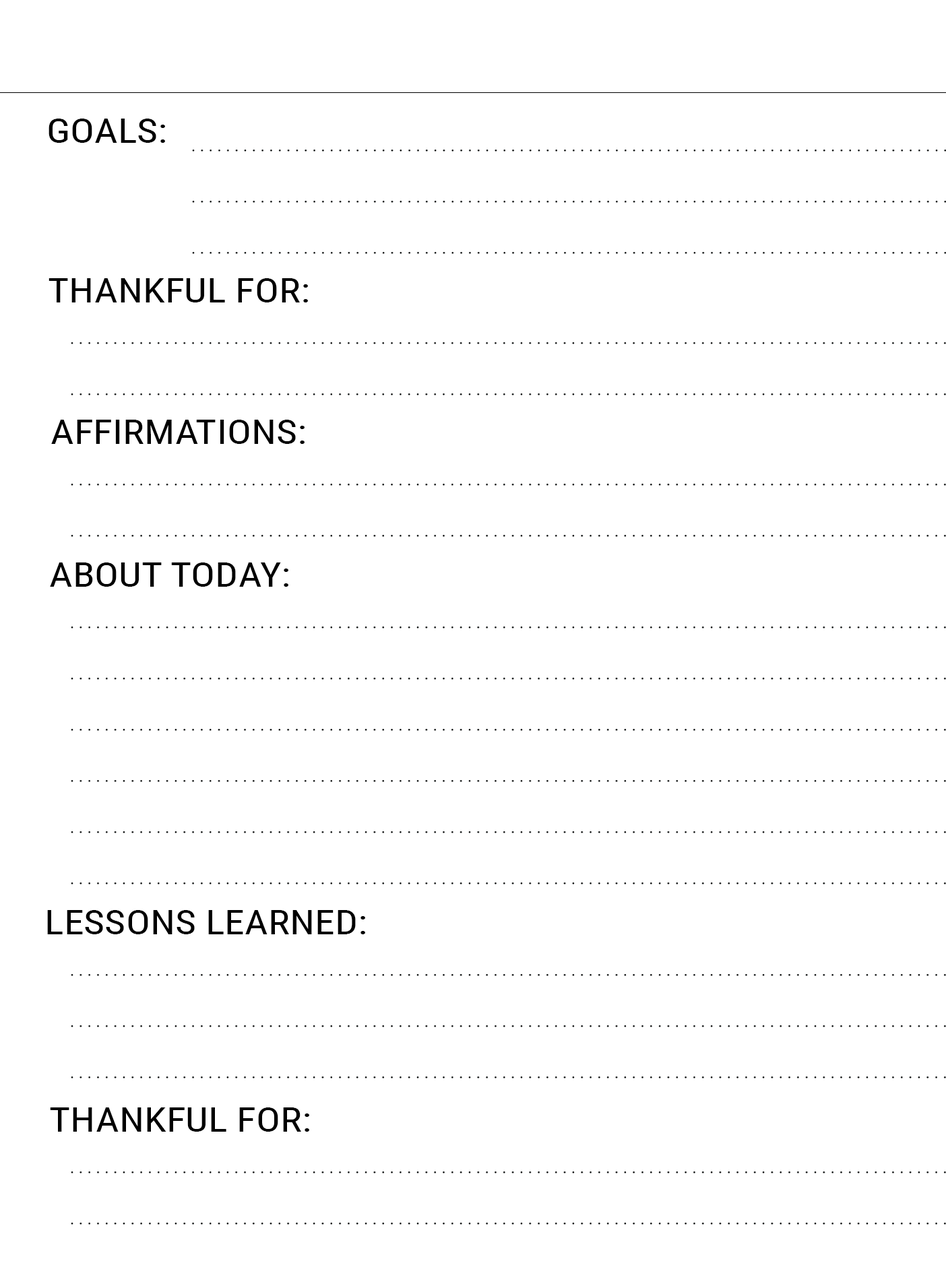
<style>
.page{position:relative;width:946px;height:1261px;background:#ffffff}
.page>*{position:absolute;margin:0}
.t1{font:33.7px "RobotoCondensed-Regular";color:#000000;scale:1.2 1}
</style>
<div class="page">
<p class="t1" style="left:48px;top:119px;width:117px;height:24px">GOALS:</p>
<p class="t1" style="left:48px;top:278px;width:260px;height:24px">THANKFUL FOR:</p>
<p class="t1" style="left:51px;top:420px;width:253px;height:24px">AFFIRMATIONS:</p>
<p class="t1" style="left:50px;top:562px;width:238px;height:25px">ABOUT TODAY:</p>
<p class="t1" style="left:47px;top:910px;width:318px;height:24px">LESSONS LEARNED:</p>
<p class="t1" style="left:50px;top:1107px;width:259px;height:25px">THANKFUL FOR:</p>
</div>
